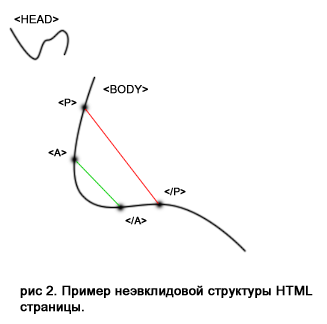
<style>
.page{position:relative;width:327px;height:324px;background:#ffffff}
.page>*{position:absolute;margin:0}
.t1{font:11px "ArialMT";color:#000000;font-weight:bold}
.t2{font:10px "ArialMT";color:#000000;font-weight:bold}
.t3{font:13px "PlusArialMT";color:#000000;font-weight:bold}
</style>
<div class="page">
<p class="t1" style="left:14px;top:15px;width:45px;height:9px">&lt;HEAD&gt;</p>
<p class="t1" style="left:103px;top:85px;width:45px;height:9px">&lt;BODY&gt;</p>
<p class="t2" style="left:58px;top:98px;width:19px;height:9px">&lt;P&gt;</p>
<p class="t2" style="left:48px;top:148px;width:19px;height:9px">&lt;A&gt;</p>
<p class="t2" style="left:164px;top:187px;width:22px;height:9px">&lt;/P&gt;</p>
<p class="t2" style="left:125px;top:216px;width:22px;height:9px">&lt;/A&gt;</p>
<p class="t3" style="left:20px;top:285px;width:293px;height:29px">ðèñ 2. Ïðèìåð íåýâêëèäîâîé ñòðóêòóðû HTML<br>ñòðàíèöû.</p>
</div>
